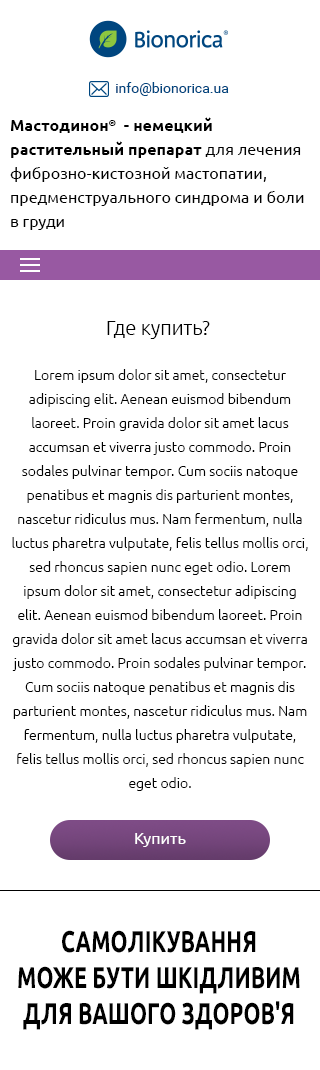
<style>
.page{position:relative;width:320px;height:1070px;background:#ffffff}
.page>*{position:absolute;margin:0}
.t1{font:14px "Roboto-Regular";color:#00467f}
.t2{font:16px/24px "Ubuntu";color:#000000}
.t3{font:16px/24px "Ubuntu-Bold";color:#000000}
.t4{font:16px "Ubuntu-Bold";color:#000000}
.t5{font:20px "Ubuntu-Light";color:#000000}
.t6{font:14px/24px "Ubuntu-Light";color:#000000}
.t7{font:16px "Ubuntu";color:#ffffff}
.t8{font:30px "Ubuntu-Bold";color:#000000;scale:0.72 1}
</style>
<div class="page">
<p class="t1" style="left:116px;top:82px;width:113px;height:14px">info@bionorica.ua</p>
<p class="t2" style="left:10px;top:117px;width:294px;height:113px"><span class="t3">Мастодинон</span><span class="t4">®</span><span class="t3">  - немецкий растительный препарат </span>для лечения <br>фиброзно-кистoзной мастопатии, предменструального синдрома и боли в груди</p>
<p class="t5" style="left:107px;top:321px;width:103px;height:18px">Где купить?</p>
<p class="t6" style="left:12px;top:369px;width:296px;height:422px;text-align:center">Lorem ipsum dolor sit amet, consectetur adipiscing elit. Aenean euismod bibendum laoreet. Proin gravida dolor sit amet lacus accumsan et viverra justo commodo. Proin sodales pulvinar tempor. Cum sociis natoque penatibus et magnis dis parturient montes, nascetur ridiculus mus. Nam fermentum, nulla luctus pharetra vulputate, felis tellus mollis orci, sed rhoncus sapien nunc eget odio. Lorem ipsum dolor sit amet, consectetur adipiscing elit. Aenean euismod bibendum laoreet. Proin gravida dolor sit amet lacus accumsan et viverra justo commodo. Proin sodales pulvinar tempor. Cum sociis natoque penatibus et magnis dis parturient montes, nascetur ridiculus mus. Nam fermentum, nulla luctus pharetra vulputate, felis tellus mollis orci, sed rhoncus sapien nunc eget odio.</p>
<p class="t7" style="left:135px;top:833px;width:51px;height:14px">Купить</p>
<p class="t8" style="left:18px;top:930px;width:282px;height:100px;text-align:center">САМОЛІКУВАННЯ<br>МОЖЕ БУТИ ШКІДЛИВИМ<br>ДЛЯ ВАШОГО ЗДОРОВ'Я</p>
</div>
